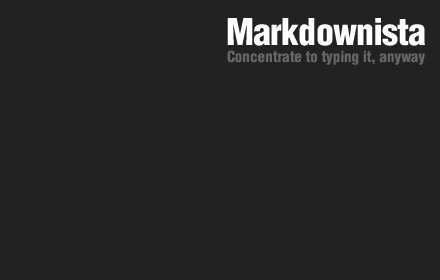
<style>
.page{position:relative;width:440px;height:280px;background:#222222}
.page>*{position:absolute;margin:0}
.t1{font:36px "Helvetica-CondensedBlack";letter-spacing:-0.025em;color:#ffffff}
.t2{font:15px "Helvetica-CondensedBlack";letter-spacing:-0.025em;color:#666666}
</style>
<div class="page">
<p class="t1" style="left:227px;top:18px;width:198px;height:28px">Markdownista</p>
<p class="t2" style="left:227px;top:50px;width:198px;height:15px">Concentrate to typing it, anyway</p>
</div>
